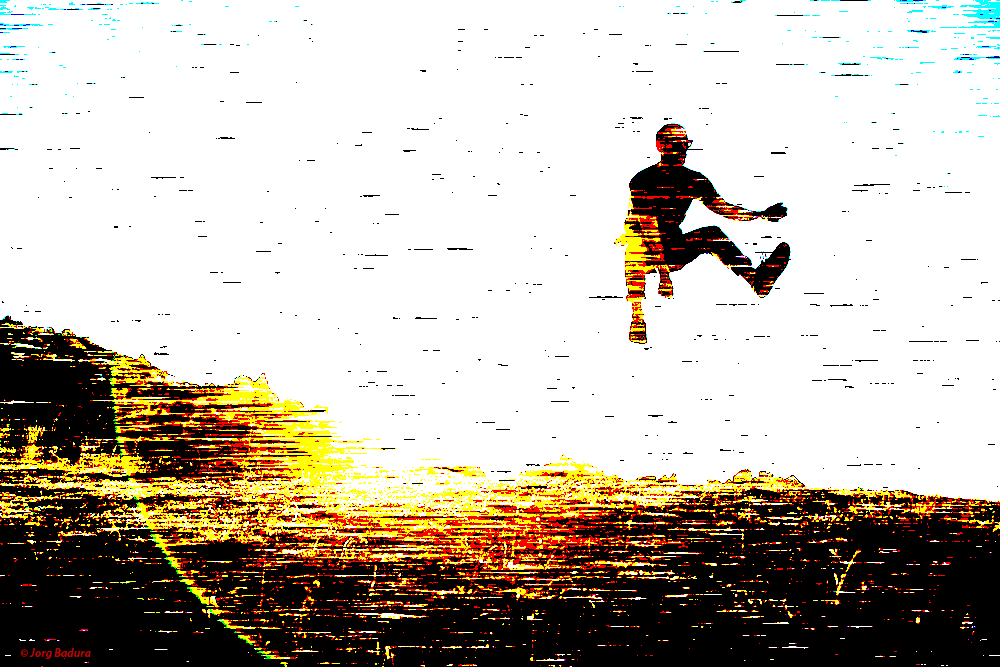
<style>
.page{position:relative;width:1000px;height:667px;background:#ffffff}
.page>*{position:absolute;margin:0}
.t1{font:12px "MyriadPro-SemiboldIt";color:#be0303}
</style>
<div class="page">
<p class="t1" style="left:21px;top:648px;width:70px;height:11px">© Jorg Badura</p>
</div>
